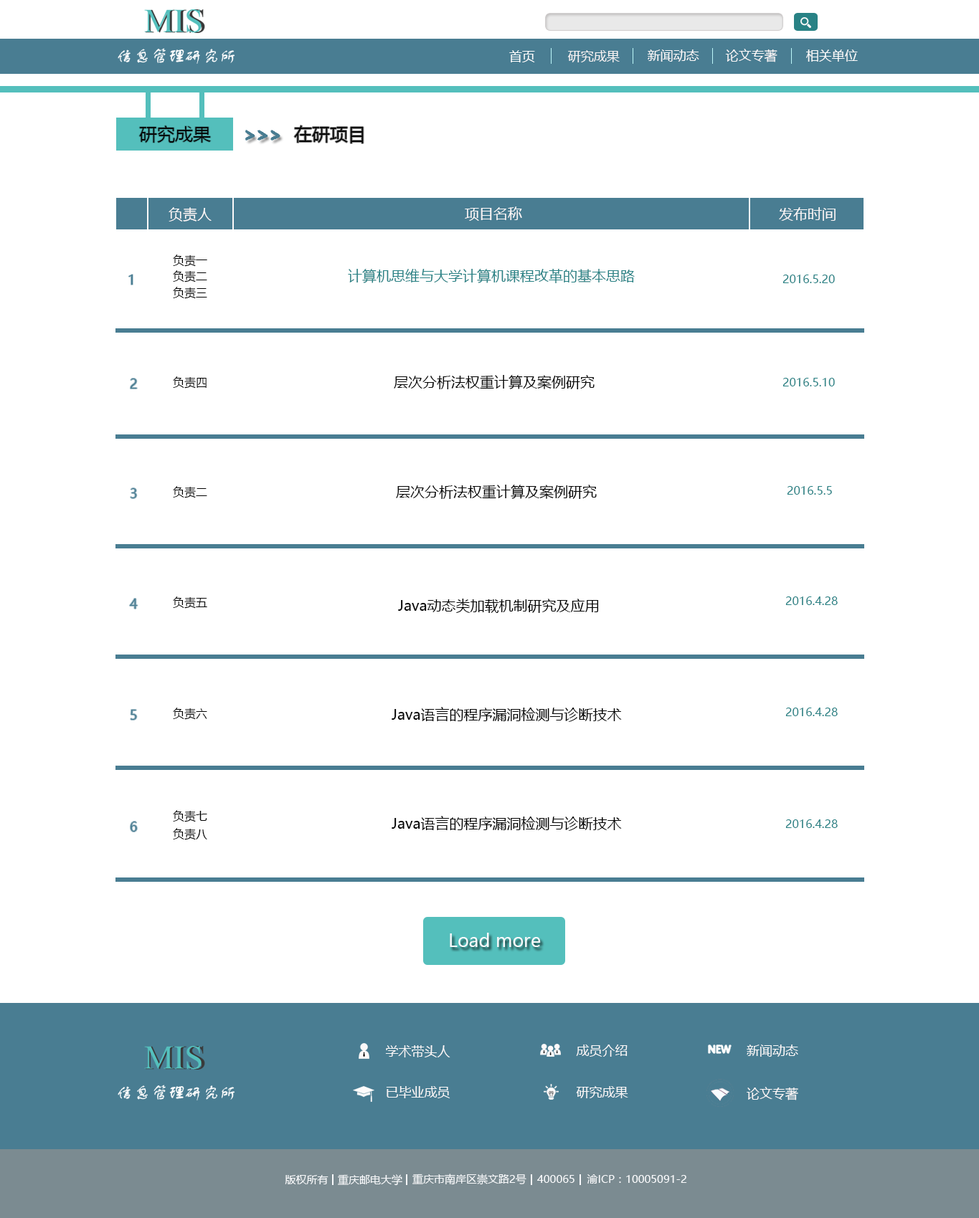
<style>
.page{position:relative;width:979px;height:1218px;background:#ffffff}
.page>*{position:absolute;margin:0}
.t1{font:12.9px "MicrosoftYaHei";color:#fefefe}
.t2{font:12.9px "MicrosoftYaHei";color:#f8f4f4}
.t3{font:12.9px "MicrosoftYaHei";color:#fefafa}
.t4{font:12.9px "MicrosoftYaHei";color:#fcf9f9}
.t5{font:12.9px "MicrosoftYaHei";color:#fdfcfc}
.t6{font:17.9px "MicrosoftYaHei";color:#060606}
.t7{font:17.9px "MicrosoftYaHei";color:#050505}
.t8{font:14.3px "MicrosoftYaHei";color:#fcf7f7}
.t9{font:11.5px "MicrosoftYaHei";color:#020202}
.t10{font:14.3px "MicrosoftYaHei";color:#288285}
.t11{font:11.5px "MicrosoftYaHei";color:#288285}
.t12{font:14.3px "MicrosoftYaHei";color:#040404}
.t13{font:12.9px "MicrosoftYaHei";color:#497d92}
.t14{font:17.9px "MicrosoftYaHei";color:#f9fafc}
.t15{font:12.9px "MicrosoftYaHei";color:#fbf8f8}
.t16{font:12.9px "MicrosoftYaHei";color:#fcfafa}
.t17{font:12.9px "MicrosoftYaHei";color:#fdf8f8}
.t18{font:10.8px "MicrosoftYaHei";color:#f9fafc}
</style>
<div class="page">
<p class="t1" style="left:509px;top:50px;width:26px;height:12px">首页</p>
<p class="t2" style="left:567px;top:50px;width:53px;height:12px">研究成果</p>
<p class="t3" style="left:648px;top:49px;width:51px;height:13px">新闻动态</p>
<p class="t4" style="left:725px;top:49px;width:52px;height:13px">论文专著</p>
<p class="t5" style="left:806px;top:49px;width:52px;height:13px">相关单位</p>
<p class="t6" style="left:139px;top:125px;width:72px;height:18px">研究成果</p>
<p class="t7" style="left:294px;top:125px;width:70px;height:18px">在研项目</p>
<p class="t8" style="left:169px;top:207px;width:43px;height:15px">负责人</p>
<p class="t8" style="left:465px;top:207px;width:57px;height:14px">项目名称</p>
<p class="t8" style="left:779px;top:207px;width:56px;height:14px">发布时间</p>
<p class="t9" style="left:173px;top:255px;width:34px;height:12px">负责一</p>
<p class="t10" style="left:348px;top:269px;width:287px;height:14px">计算机思维与大学计算机课程改革的基本思路</p>
<p class="t9" style="left:173px;top:270px;width:34px;height:13px">负责二</p>
<p class="t11" style="left:782px;top:275px;width:53px;height:8px">2016.5.20</p>
<p class="t9" style="left:173px;top:287px;width:34px;height:12px">负责三</p>
<p class="t9" style="left:173px;top:376px;width:34px;height:13px">负责四</p>
<p class="t12" style="left:394px;top:375px;width:200px;height:14px">层次分析法权重计算及案例研究</p>
<p class="t11" style="left:782px;top:378px;width:53px;height:8px">2016.5.10</p>
<p class="t13" style="left:130px;top:379px;width:7px;height:10px">2</p>
<p class="t12" style="left:396px;top:485px;width:201px;height:14px">层次分析法权重计算及案例研究</p>
<p class="t13" style="left:131px;top:488px;width:6px;height:10px">3</p>
<p class="t9" style="left:173px;top:486px;width:34px;height:12px">负责二</p>
<p class="t11" style="left:787px;top:486px;width:45px;height:9px">2016.5.5</p>
<p class="t13" style="left:130px;top:599px;width:8px;height:10px">4</p>
<p class="t9" style="left:173px;top:597px;width:34px;height:12px">负责五</p>
<p class="t12" style="left:398px;top:599px;width:201px;height:14px">Java动态类加载机制研究及应用</p>
<p class="t11" style="left:785px;top:597px;width:53px;height:8px">2016.4.28</p>
<p class="t13" style="left:131px;top:710px;width:6px;height:10px">5</p>
<p class="t9" style="left:173px;top:708px;width:34px;height:12px">负责六</p>
<p class="t12" style="left:392px;top:707px;width:230px;height:15px">Java语言的程序漏洞检测与诊断技术</p>
<p class="t11" style="left:785px;top:708px;width:53px;height:8px">2016.4.28</p>
<p class="t13" style="left:130px;top:822px;width:7px;height:10px">6</p>
<p class="t9" style="left:173px;top:810px;width:34px;height:12px">负责七</p>
<p class="t12" style="left:392px;top:816px;width:230px;height:15px">Java语言的程序漏洞检测与诊断技术</p>
<p class="t11" style="left:785px;top:820px;width:53px;height:8px">2016.4.28</p>
<p class="t9" style="left:173px;top:828px;width:34px;height:12px">负责八</p>
<p class="t14" style="left:450px;top:933px;width:91px;height:14px">Load more</p>
<p class="t15" style="left:385px;top:1045px;width:65px;height:13px">学术带头人</p>
<p class="t15" style="left:576px;top:1045px;width:51px;height:12px">成员介绍</p>
<p class="t16" style="left:746px;top:1045px;width:52px;height:12px">新闻动态</p>
<p class="t15" style="left:386px;top:1086px;width:64px;height:13px">已毕业成员</p>
<p class="t15" style="left:576px;top:1086px;width:52px;height:13px">研究成果</p>
<p class="t17" style="left:746px;top:1087px;width:52px;height:14px">论文专著</p>
<p class="t18" style="left:285px;top:1175px;width:43px;height:10px">版权所有</p>
<p class="t18" style="left:338px;top:1175px;width:64px;height:11px">重庆邮电大学</p>
<p class="t18" style="left:412px;top:1174px;width:114px;height:11px">重庆市南岸区崇文路2号</p>
<p class="t18" style="left:537px;top:1175px;width:37px;height:8px">400065</p>
<p class="t18" style="left:587px;top:1175px;width:100px;height:9px">渝ICP：10005091-2</p>
</div>
